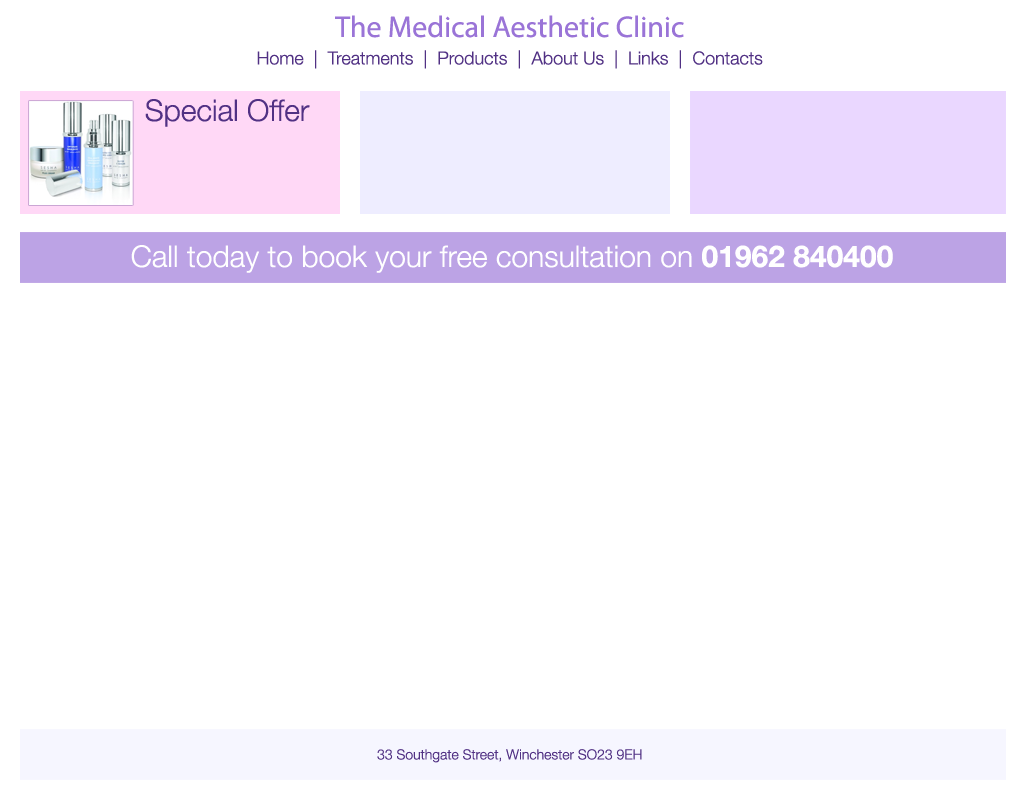
<style>
.page{position:relative;width:1024px;height:800px;background:#ffffff}
.page>*{position:absolute;margin:0}
.t1{font:30px "MyriadPro-Regular";color:#9a74d7}
.t2{font:18px "HelveticaNeue-Light";color:#513184}
.t3{font:30px "HelveticaNeue-Light";color:#513184}
.t4{font:30px "HelveticaNeue-Light";color:#ffffff}
.t5{font:30px "HelveticaNeue-Bold";color:#ffffff}
.t6{font:14px "HelveticaNeue-Light";color:#513184}
</style>
<div class="page">
<p class="t1" style="left:335px;top:15px;width:349px;height:23px">The Medical Aesthetic Clinic</p>
<p class="t2" style="left:257px;top:50px;width:506px;height:19px">Home  |  Treatments  |  Products  |  About Us  |  Links  |  Contacts</p>
<p class="t3" style="left:145px;top:99px;width:165px;height:28px">Special Offer</p>
<p class="t4" style="left:131px;top:245px;width:762px;height:28px">Call today to book your free consultation on <span class="t5">01962 840400</span></p>
<p class="t6" style="left:377px;top:749px;width:265px;height:14px">33 Southgate Street, Winchester SO23 9EH</p>
</div>
